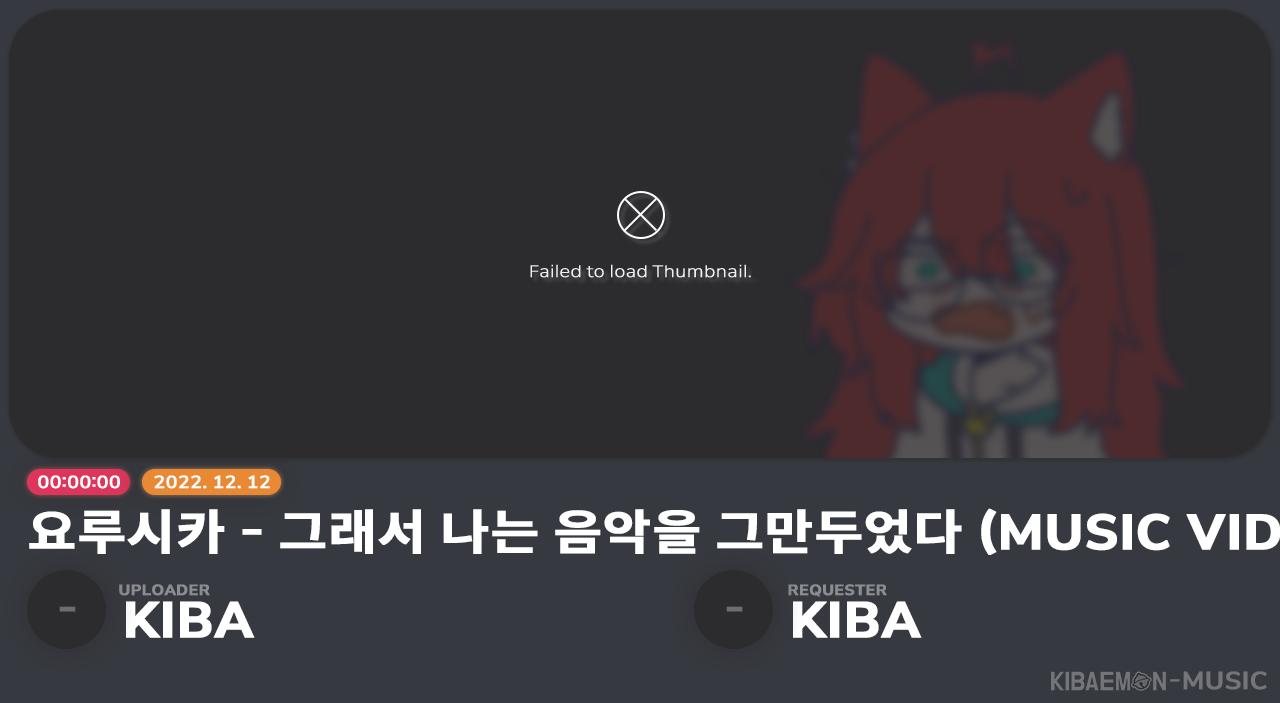
<style>
.page{position:relative;width:1280px;height:703px;background:#2c2b2d}
.page>*{position:absolute;margin:0}
.t1{font:16.3px "MinSans-Light";color:#f1f1f1;font-weight:bold;scale:1.1 1}
.t2{font:17.4px "MinSans-Medium";color:#ffffff;font-weight:bold;scale:1.1 1}
.t3{font:14.8px "MinSans-Bold";color:#8c8d90;font-weight:bold;scale:1.1 1}
.t4{font:39.2px "MinSans-Bold";color:#6d6d6e;font-weight:bold;scale:1.1 1}
.t5{font:49.4px "MinSans-Bold";color:#ffffff;font-weight:bold;scale:1.1 1}
.t6{font:24.2px "MinSans-Medium";color:#737579;font-weight:bold;scale:1.1 1}
</style>
<div class="page">
<p class="t1" style="left:530px;top:264px;width:221px;height:14px">Failed to load Thumbnail.</p>
<p class="t2" style="left:38px;top:475px;width:82px;height:14px">00:00:00</p>
<p class="t2" style="left:154px;top:475px;width:116px;height:14px">2022. 12. 12</p>
<p class="t3" style="left:119px;top:584px;width:91px;height:12px">UPLOADER</p>
<p class="t3" style="left:788px;top:584px;width:99px;height:13px">REQUESTER</p>
<p class="t4" style="left:59px;top:606px;width:17px;height:6px">-</p>
<p class="t5" style="left:126px;top:601px;width:129px;height:37px">KIBA</p>
<p class="t4" style="left:726px;top:606px;width:17px;height:6px">-</p>
<p class="t5" style="left:793px;top:601px;width:129px;height:37px">KIBA</p>
<p class="t6" style="left:1170px;top:671px;width:97px;height:19px">-MUSIC</p>
</div>
